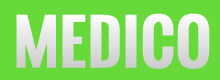
<style>
.page{position:relative;width:220px;height:80px;background:#67d93a}
.page>*{position:absolute;margin:0}
.t1{font:60px "OswaldStencil-Bold";color:#e3e3e3;font-weight:bold}
</style>
<div class="page">
<p class="t1" style="left:16px;top:13px;width:194px;height:56px">medico</p>
</div>
